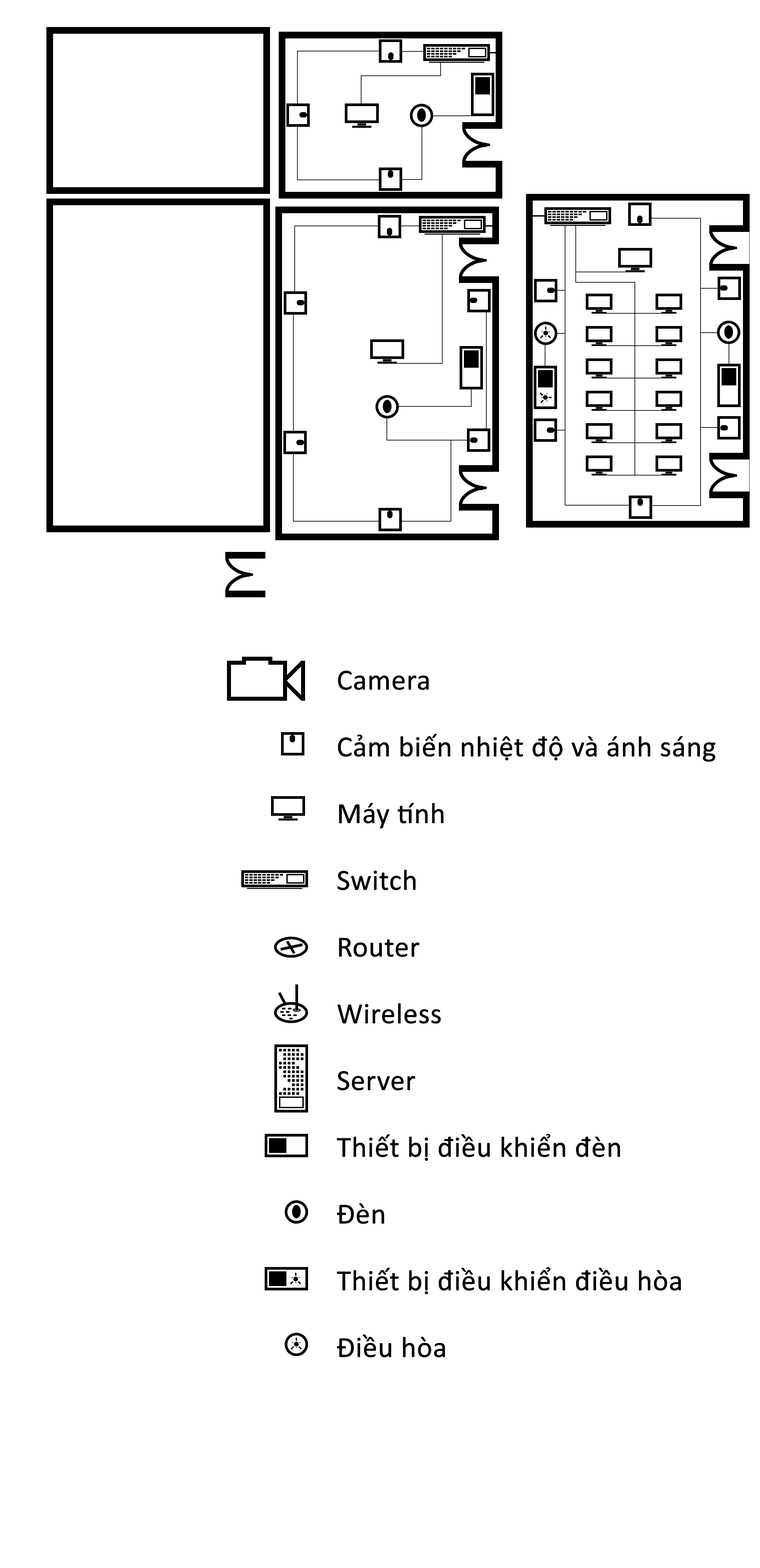
<style>
.page{position:relative;width:760px;height:1568px;background:#ffffff}
.page>*{position:absolute;margin:0}
.t1{font:29.4px/66.7px "Calibri";letter-spacing:-0.01em;color:#000000;font-weight:bold}
</style>
<div class="page">
<p class="t1" style="left:337px;top:670px;width:378px;height:687px">Camera<br>Cảm biến nhiệt độ và ánh sáng<br>Máy tính<br>Switch<br>Router<br>Wireless<br>Server<br>Thiết bị điều khiển đèn<br>Đèn<br>Thiết bị điều khiển điều hòa<br>Điều hòa</p>
</div>
